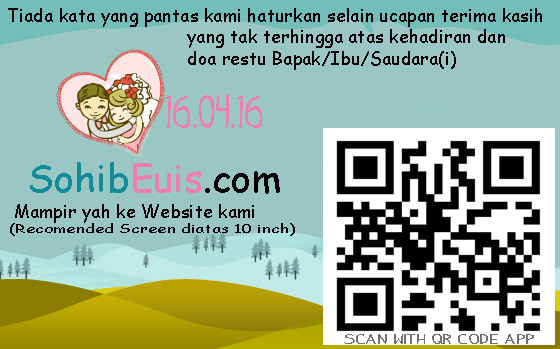
<style>
.page{position:relative;width:560px;height:349px;background:#9ac7c4}
.page>*{position:absolute;margin:0}
.t1{font:18px "ComicSansMS";color:#060002}
.t2{font:36px "IndyPimp";color:#f17dab}
.t3{font:38.1px "ComicSansMS";color:#128c9b}
.t4{font:38.1px "ComicSansMS";color:#f17dab}
.t5{font:38.1px "ComicSansMS";color:#060002}
.t6{font:11.8px "ComicSansMS";color:#010000;scale:1.44 1}
.t7{font:10.5px "IndyPimp";color:#717171;scale:1.89 1}
</style>
<div class="page">
<p class="t1" style="left:8px;top:8px;width:534px;height:62px">Tiada kata yang pantas kami haturkan selain ucapan terima kasih <br>      yang tak terhingga atas kehadiran dan <br>     doa restu Bapak/Ibu/Saudara(i)</p>
<p class="t2" style="left:165px;top:95px;width:97px;height:33px">16.04.16</p>
<p class="t3" style="left:30px;top:162px;width:250px;height:32px">Sohib<span class="t4">Euis</span><span class="t5">.com</span></p>
<p class="t1" style="left:15px;top:204px;width:239px;height:19px">Mampir yah ke Website kami</p>
<p class="t6" style="left:10px;top:223px;width:285px;height:13px">(Recomended Screen diatas 10 inch)</p>
<p class="t7" style="left:344px;top:334px;width:190px;height:10px">Scan with QR Code APP</p>
</div>
